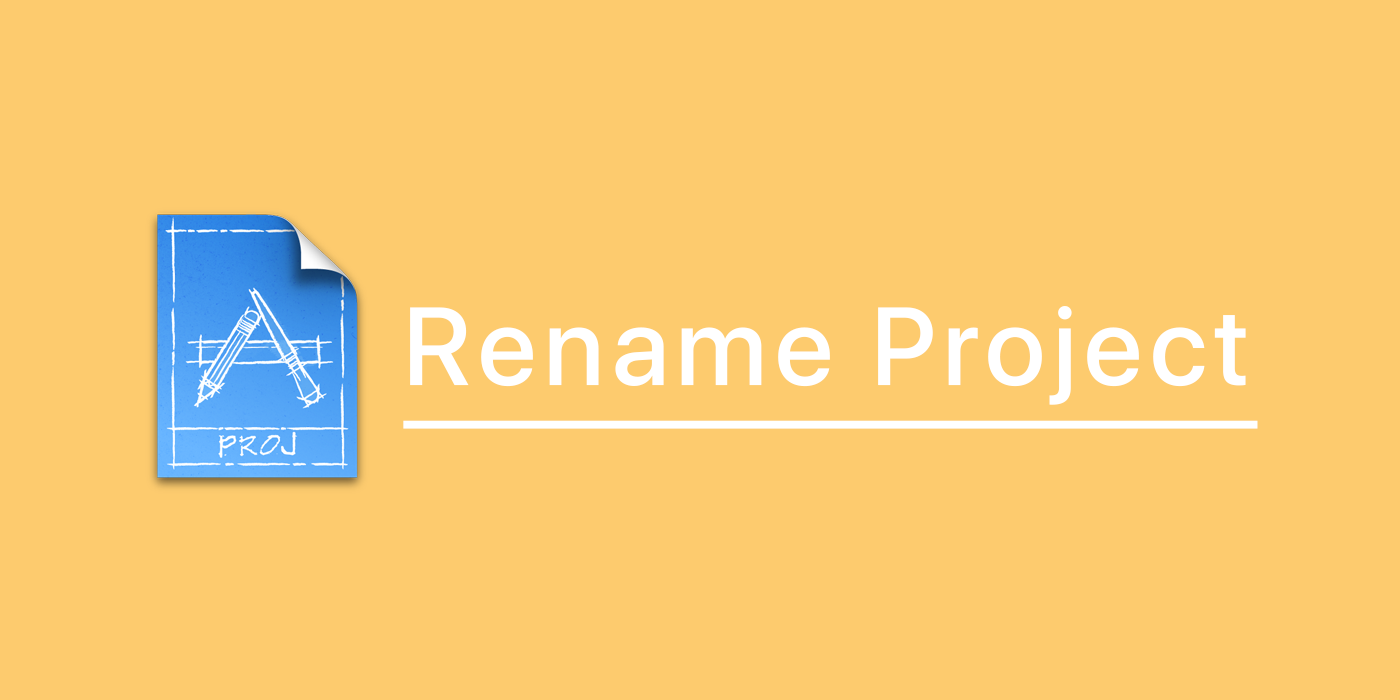
<style>
.page{position:relative;width:1400px;height:700px;background:#fdcb6e}
.page>*{position:absolute;margin:0}
.t1{font:110px "SFProDisplay-Medium";letter-spacing:0.07em;color:#ffffff;text-decoration:underline}
</style>
<div class="page">
<p class="t1" style="left:403px;top:306px;width:855px;height:123px">Rename Project</p>
</div>
